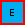
<style>
.page{position:relative;width:25px;height:25px;background:#00aeef}
.page>*{position:absolute;margin:0}
.t1{font:9px "MicrosoftSansSerif";color:#010000}
</style>
<div class="page">
<p class="t1" style="left:10px;top:9px;width:4px;height:7px">E</p>
</div>
